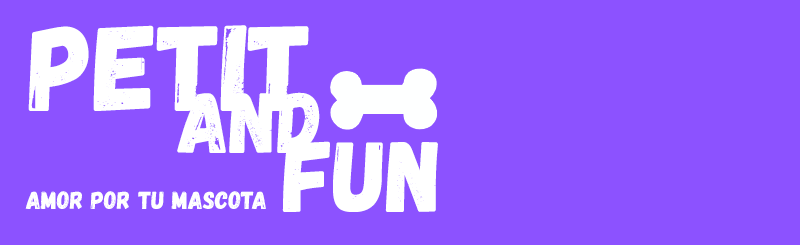
<style>
.page{position:relative;width:800px;height:245px;background:#8c52ff}
.page>*{position:absolute;margin:0}
.t1{font:122.1px "Gagalin-Regular";color:#ffffff}
.t2{font:86.5px "Gagalin-Regular";color:#ffffff}
.t3{font:101.1px "Gagalin-Regular";color:#ffffff}
.t4{font:25px "Gagalin-Regular";color:#ffffff}
</style>
<div class="page">
<p class="t1" style="left:28px;top:25px;width:281px;height:86px">Petit</p>
<p class="t2" style="left:177px;top:92px;width:143px;height:61px">and</p>
<p class="t3" style="left:282px;top:141px;width:156px;height:71px">fun</p>
<p class="t4" style="left:25px;top:191px;width:241px;height:18px">amor por tu mascota</p>
</div>
